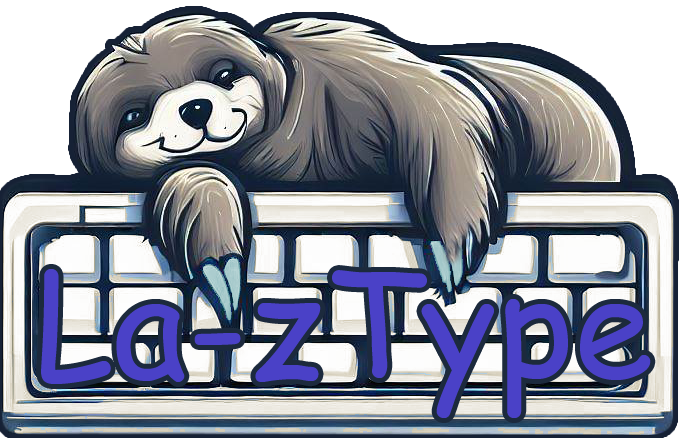
<style>
.page{position:relative;width:683px;height:438px}
.page>*{position:absolute;margin:0}
.t1{font:144px "ComicSansMS";color:#4a41c7}
</style>
<div class="page">
<p class="t1" style="left:41px;top:269px;width:610px;height:149px">La-zType</p>
</div>
